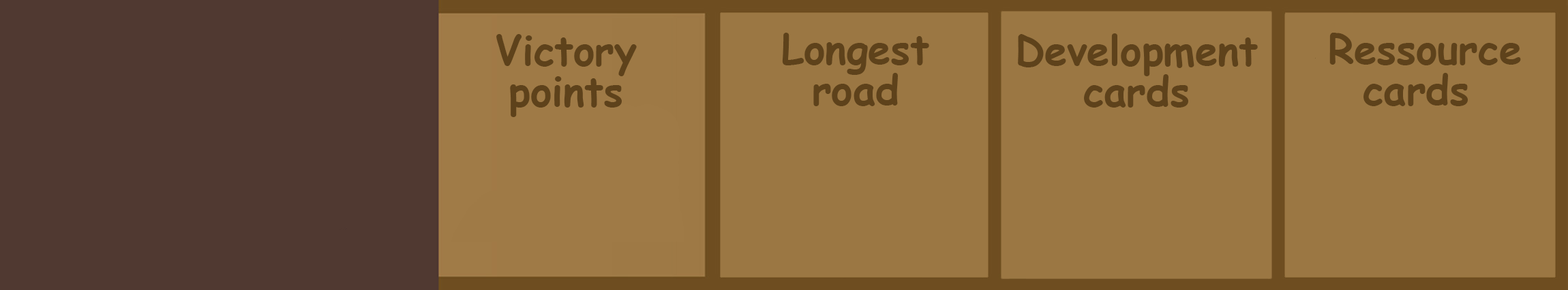
<style>
.page{position:relative;width:1568px;height:290px;background:#9b7743}
.page>*{position:absolute;margin:0}
.t1{font:40.9px/40.9px "ComicSansMS-Bold";letter-spacing:-0.005em;color:#5e421b}
</style>
<div class="page">
<p class="t1" style="left:496px;top:34px;width:141px;height:83px;text-align:center">Victory<br>points</p>
<p class="t1" style="left:782px;top:33px;width:147px;height:73px;text-align:center">Longest<br>road</p>
<p class="t1" style="left:1018px;top:33px;width:240px;height:75px;text-align:center">Development<br>cards</p>
<p class="t1" style="left:1329px;top:33px;width:192px;height:73px;text-align:center">Ressource<br>cards</p>
</div>
